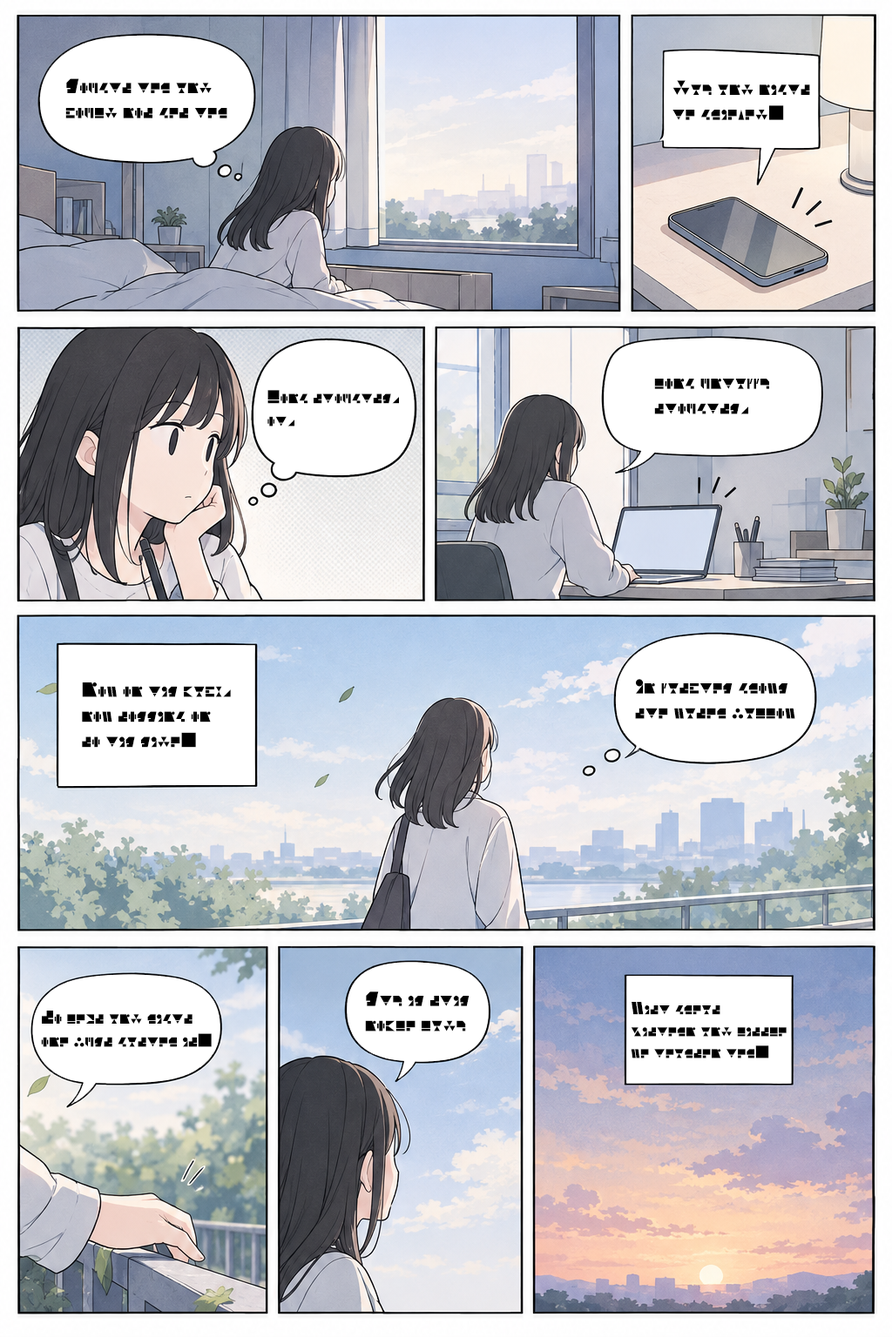
<style>
.page{position:relative;width:892px;height:1337px}
.page>*{position:absolute;margin:0}
.t1{font:20.9px "EndfieldByButan";color:#000000}
.t2{font:19.2px "EndfieldByButan";color:#000000}
.t3{font:18.3px "EndfieldByButan";color:#000000}
</style>
<div class="page">
<p class="t1" style="left:65px;top:78px;width:162px;height:40px">Sought her and <br>could not get her;</p>
<p class="t1" style="left:672px;top:80px;width:138px;height:40px">Day and night <br>he grieved.</p>
<p class="t1" style="left:654px;top:379px;width:115px;height:35px">long unhappy <br>thoughts,</p>
<p class="t2" style="left:267px;top:390px;width:132px;height:37px">Long thoughts, <br>oh,</p>
<p class="t1" style="left:82px;top:683px;width:149px;height:65px">Now on his back, <br>now tossing on <br>to his side.</p>
<p class="t1" style="left:635px;top:679px;width:160px;height:40px">In patches grows <br>the water mallow;</p>
<p class="t1" style="left:365px;top:992px;width:104px;height:40px">Shy is this <br>noble lady;</p>
<p class="t2" style="left:41px;top:1011px;width:171px;height:36px">To left and right <br>one must gather it.</p>
<p class="t3" style="left:630px;top:1002px;width:156px;height:57px">With great <br>zithern and little <br>we hearten her.</p>
</div>
